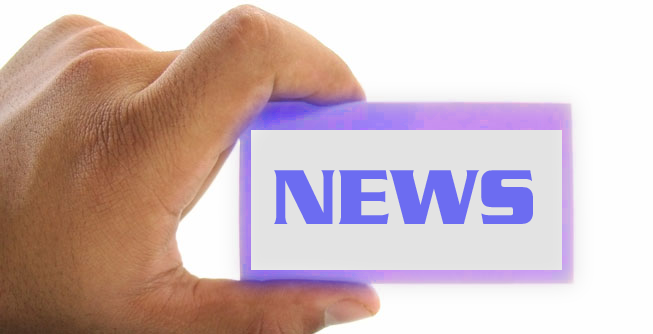
<style>
.page{position:relative;width:653px;height:334px;background:#fefefe}
.page>*{position:absolute;margin:0}
.t1{font:80.5px "SerpentineD-Bold";color:#6c6cf1}
</style>
<div class="page">
<p class="t1" style="left:274px;top:170px;width:259px;height:54px">NEWS</p>
</div>
